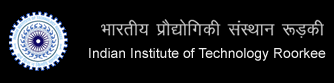
<style>
.page{position:relative;width:334px;height:83px;background:#000000}
.page>*{position:absolute;margin:0}
.t1{font:14px "ArialMT";color:#eeeeee}
.t2{font:14px "ArialMT";color:#eeeeee;text-transform:uppercase}
</style>
<div class="page">
<p class="t1" style="left:89px;top:48px;width:237px;height:13px"><span class="t2">I</span>ndian Institute of Technology Roorkee</p>
</div>
